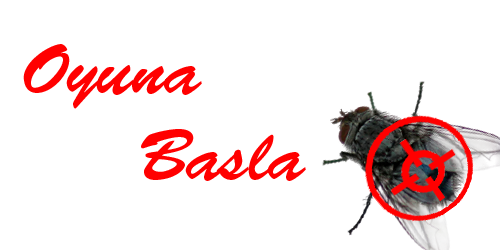
<style>
.page{position:relative;width:500px;height:250px;background:#ffffff}
.page>*{position:absolute;margin:0}
.t1{font:72px "BrushScriptStd";color:#ff0000}
</style>
<div class="page">
<p class="t1" style="left:23px;top:44px;width:283px;height:137px;text-align:center">Oyuna <br>        Basla</p>
</div>
